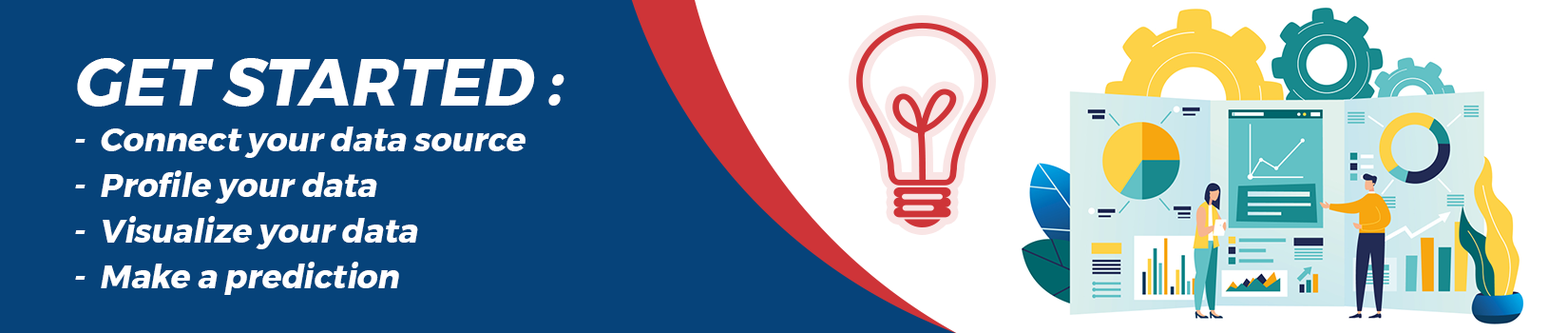
<style>
.page{position:relative;width:1568px;height:333px;background:#06437a}
.page>*{position:absolute;margin:0}
.t1{font:32.8px/45.5px "Montserrat-Bold";color:#ffffff;font-style:italic}
.t2{font:65.6px/98.4px "Montserrat-Bold";color:#ffffff;text-transform:uppercase;font-style:italic}
</style>
<div class="page">
<p class="t1" style="left:75px;top:58px;width:489px;height:237px"><span class="t2">Get started :<br></span>-  Connect your data source<br>-  Profile your data<br>-  Visualize your data <br>-  Make a prediction</p>
</div>
